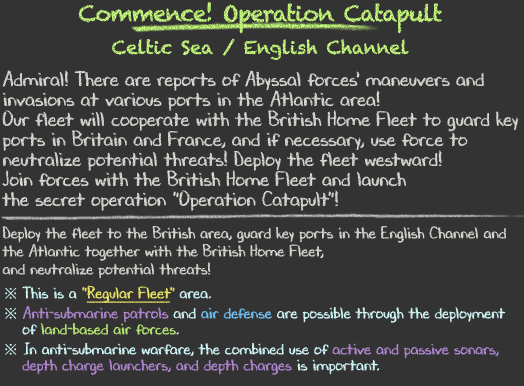
<style>
.page{position:relative;width:524px;height:386px;background:#333333}
.page>*{position:absolute;margin:0}
.t1{font:22px/36px "Chalkduster";letter-spacing:-0.04em;color:#bdee78}
.t2{font:18px/36px "Chalkduster";color:#bdee78}
.t3{font:20px/20px "DJBChalkItUp";color:#d9ded6}
.t4{font:16px/18px "DJBChalkItUp";color:#d9ded6}
.t5{font:16px/24px "DJBChalkItUp";color:#d9ded6}
.t6{font:16px/20px "TimesNewRomanPSMT";color:#d7feff}
.t7{font:16px/18px "DJBChalkItUp";color:#d7feff}
.t8{font:16px/18px "DJBChalkItUp";color:#f5ed68}
.t9{font:16px/18px "DJBChalkItUp";color:#f5ed68;text-decoration:underline}
.t10{font:16px/16px "TimesNewRomanPSMT";color:#d7feff}
.t11{font:16px/16px "DJBChalkItUp";color:#b489d6}
.t12{font:16px/16px "DJBChalkItUp";color:#d7feff}
.t13{font:16px/16px "DJBChalkItUp";color:#76c8fb}
.t14{font:16px/16px "DJBChalkItUp";color:#bdef78}
.t15{font:16px/20px "DJBChalkItUp";color:#d7feff}
</style>
<div class="page">
<p class="t1" style="left:78px;top:2px;width:364px;height:58px;text-align:center">Commence! Operation Catapult<br><span class="t2">Celtic Sea / English Channel</span></p>
<p class="t3" style="left:1px;top:70px;width:518px;height:305px">Admiral! There are reports of Abyssal forces' maneuvers and<br>invasions at various ports in the Atlantic area!<br>Our fleet will cooperate with the British Home Fleet to guard key<br>ports in Britain and France, and if necessary, use force to<br>neutralize potential threats! Deploy the fleet westward!<br>Join forces with the British Home Fleet and launch<br>the secret operation "Operation Catapult"!<br><br><span class="t4">Deploy the fleet to the British area, guard key ports in the English Channel and<br>the Atlantic together with the British Home Fleet,<br>and neutralize potential threats</span><span class="t5">!<br></span><span class="t6">※ </span><span class="t7">This is a </span><span class="t8">"</span><span class="t9">Regular Fleet</span><span class="t8">"</span><span class="t7"> area.<br></span><span class="t10">※ </span><span class="t11">Anti-submarine patrols</span><span class="t12"> and </span><span class="t13">air defense</span><span class="t12"> are possible through the deployment<br>　 of </span><span class="t14">land-based air forces</span><span class="t15">.<br></span><span class="t10">※</span><span class="t12"> In anti-submarine warfare, the combined use of </span><span class="t11">active and passive sonars,<br>　 depth charge launchers, and depth charges</span><span class="t12"> is important.</span></p>
</div>
